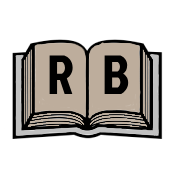
<style>
.page{position:relative;width:180px;height:180px;background:#ffffff}
.page>*{position:absolute;margin:0}
.t1{font:55px "JockeyOne-Regular";color:#000000}
</style>
<div class="page">
<p class="t1" style="left:49px;top:55px;width:24px;height:39px">R</p>
<p class="t1" style="left:104px;top:55px;width:25px;height:39px">B</p>
</div>
